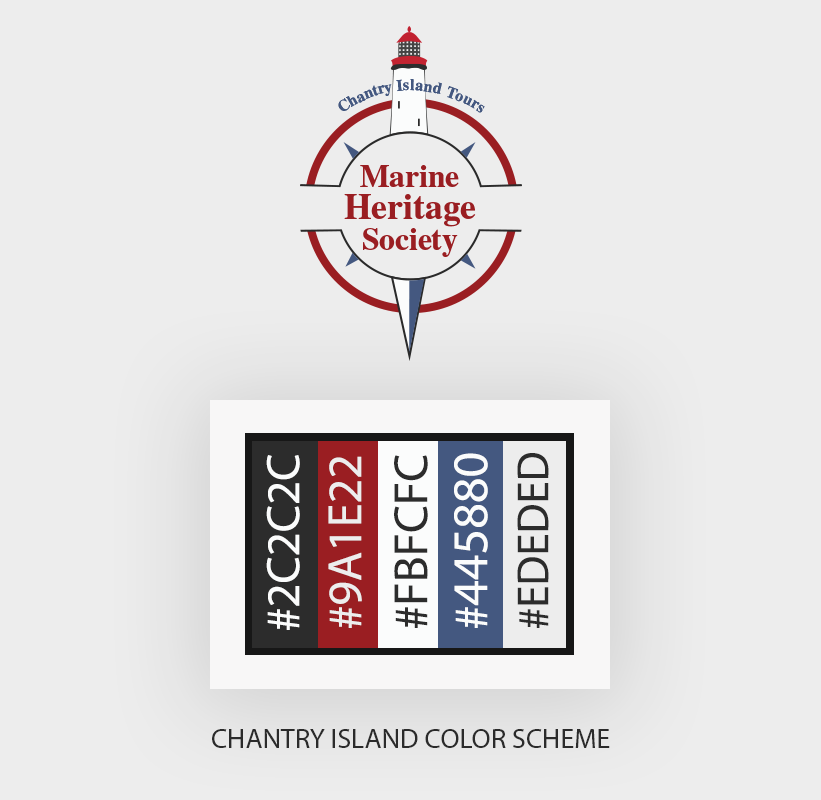
<style>
.page{position:relative;width:821px;height:800px;background:#ededed}
.page>*{position:absolute;margin:0}
.t1{font:47px "MyriadPro-Regular";color:#fbfcfc}
.t2{font:48px "MyriadPro-Regular";color:#fbfcfc}
.t3{font:48px "MyriadPro-Regular";color:#ededed}
.t4{font:48px "MyriadPro-Regular";color:#2c2c2c}
.t5{font:50px "MyriadPro-Regular";color:#fbfcfc}
.t6{font:45px "MyriadPro-Regular";color:#2c2c2c}
.t7{font:44px "MyriadPro-Regular";color:#2c2c2c}
.t8{font:28px "MyriadPro-Regular";color:#2c2c2c}
</style>
<div class="page">
<p class="t1" style="left:266px;top:455px;width:34px;height:175px;rotate:-90deg"><span class="t2">#</span>2C2C2C</p>
<p class="t3" style="left:328px;top:456px;width:34px;height:172px;rotate:-90deg">#9A1E22</p>
<p class="t4" style="left:394px;top:455px;width:34px;height:173px;rotate:-90deg">#FBFCFC</p>
<p class="t5" style="left:454px;top:453px;width:34px;height:175px;rotate:-90deg"><span class="t2">#</span>445880</p>
<p class="t6" style="left:517px;top:453px;width:32px;height:175px;rotate:-90deg"><span class="t7">#</span>EDEDED</p>
<p class="t8" style="left:212px;top:729px;width:398px;height:19px">CHANTRY ISLAND COLOR SCHEME</p>
</div>
